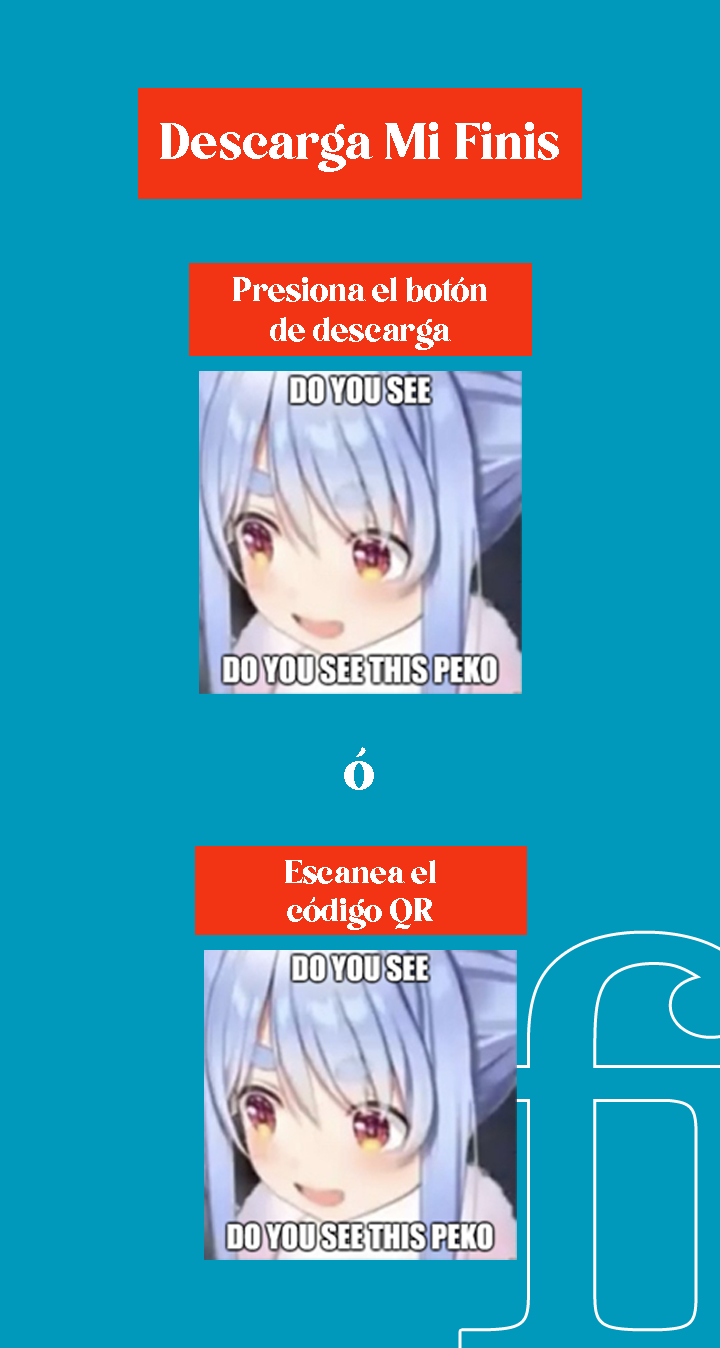
<style>
.page{position:relative;width:720px;height:1348px;background:#0099bb}
.page>*{position:absolute;margin:0}
.t1{font:50.2px "5thAvenue";color:#ffffff}
.t2{font:32.9px "5thAvenue";color:#feffff}
.t3{font:55.7px "5thAvenue";color:#ffffff}
.t4{font:31.6px "5thAvenue";color:#feffff}
</style>
<div class="page">
<p class="t1" style="left:160px;top:122px;width:399px;height:50px">Descarga Mi Finis</p>
<p class="t2" style="left:233px;top:277px;width:254px;height:73px;text-align:center">Presiona el botón<br>de descarga</p>
<p class="t3" style="left:344px;top:747px;width:30px;height:43px">ó</p>
<p class="t4" style="left:285px;top:860px;width:151px;height:70px;text-align:center">Escanea el<br>código QR</p>
</div>
